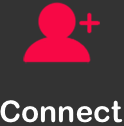
<style>
.page{position:relative;width:124px;height:126px;background:#333333}
.page>*{position:absolute;margin:0}
.t1{font:30px "ArialRoundedMTBold";color:#fefefe}
</style>
<div class="page">
<p class="t1" style="left:0px;top:100px;width:123px;height:23px">Connect</p>
</div>
